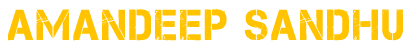
<style>
.page{position:relative;width:408px;height:51px;background:#ffffff}
.page>*{position:absolute;margin:0}
.t1{font:43.2px "Captureit";letter-spacing:0.075em;color:#ffc300;text-transform:uppercase;scale:0.92 1}
</style>
<div class="page">
<p class="t1" style="left:8px;top:8px;width:395px;height:33px">Amandeep Sandhu</p>
</div>
